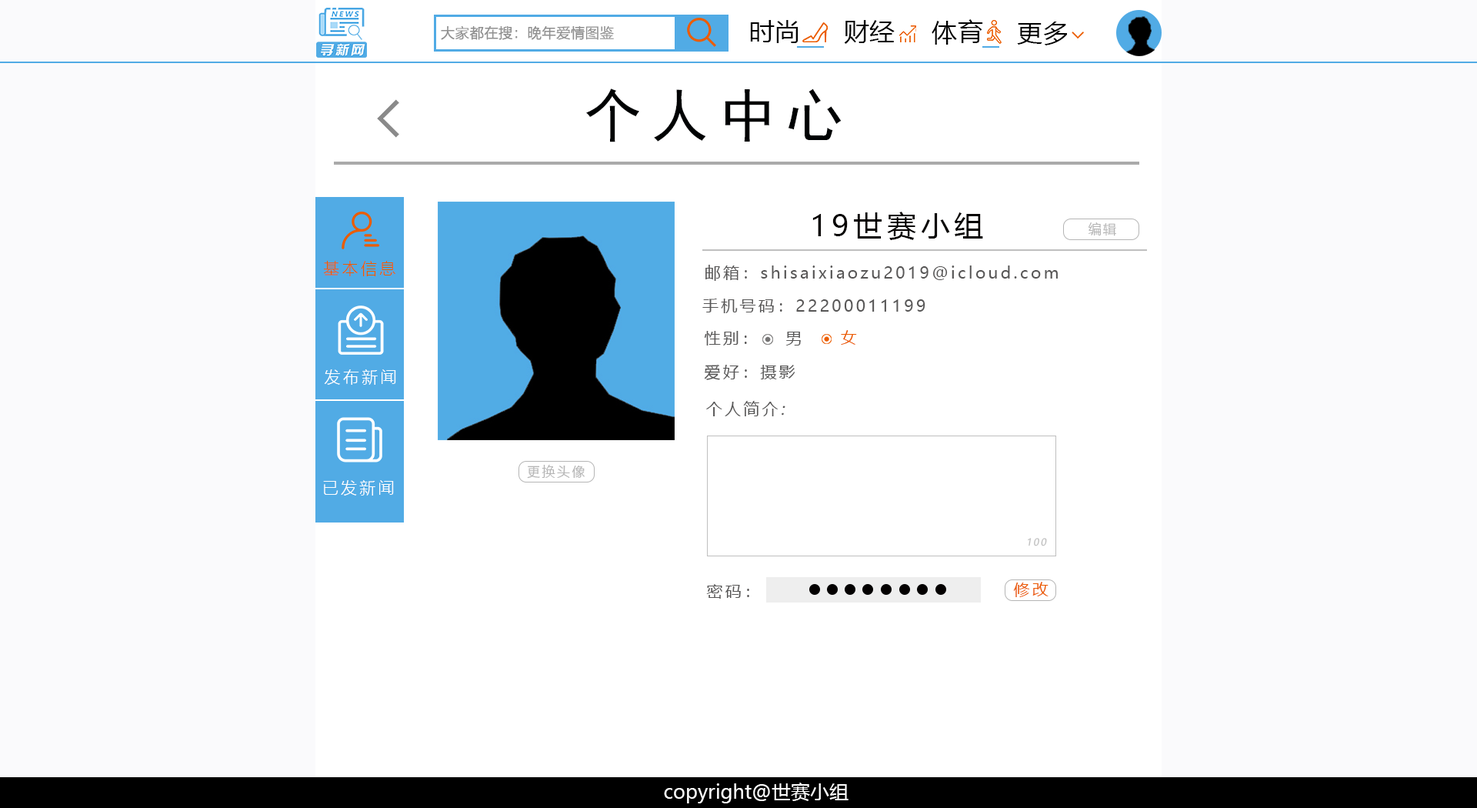
<style>
.page{position:relative;width:1477px;height:808px;background:#ffffff}
.page>*{position:absolute;margin:0}
.t1{font:14.1px "MicrosoftYaHeiLight";color:#8f8f8f;font-weight:bold}
.t2{font:25.6px "MicrosoftYaHei";color:#000000}
.t3{font:57.7px "SimHei";letter-spacing:0.165em;color:#000203}
.t4{font:28.8px "MicrosoftYaHei";letter-spacing:0.165em;color:#050201}
.t5{font:12.8px "MicrosoftYaHei";letter-spacing:0.165em;color:#b5b5b5}
.t6{font:16px "MicrosoftYaHeiLight";letter-spacing:0.165em;color:#eb5c00}
.t7{font:16px "MicrosoftYaHei";letter-spacing:0.165em;color:#575656}
.t8{font:16px "MicrosoftYaHei";letter-spacing:0.165em;color:#eb5c00}
.t9{font:16px "MicrosoftYaHeiLight";letter-spacing:0.165em;color:#ffffff}
.t10{font:16px "MicrosoftYaHei";letter-spacing:0.165em;color:#575656;font-style:italic}
.t11{font:16px "MicrosoftYaHeiLight";letter-spacing:0.165em;color:#fffefe}
.t12{font:9.6px "MicrosoftYaHei";letter-spacing:0.165em;color:#bfbfbf;font-style:italic}
.t13{font:19.2px "MicrosoftYaHei";color:#fefefe}
</style>
<div class="page">
<p class="t1" style="left:441px;top:26px;width:173px;height:14px">大家都在搜：晚年爱情图鉴</p>
<p class="t2" style="left:750px;top:20px;width:48px;height:23px">时尚</p>
<p class="t2" style="left:844px;top:20px;width:50px;height:24px">财经</p>
<p class="t2" style="left:931px;top:19px;width:52px;height:26px">体育</p>
<p class="t2" style="left:1017px;top:22px;width:50px;height:23px">更多</p>
<p class="t3" style="left:586px;top:88px;width:255px;height:54px">个人中心</p>
<p class="t4" style="left:812px;top:211px;width:171px;height:29px">19世赛小组</p>
<p class="t5" style="left:1088px;top:222px;width:28px;height:14px">编辑</p>
<p class="t6" style="left:323px;top:260px;width:72px;height:16px">基本信息</p>
<p class="t7" style="left:705px;top:265px;width:352px;height:16px">邮箱：shisaixiaozu2019@icloud.com</p>
<p class="t7" style="left:702px;top:298px;width:223px;height:15px">手机号码：22200011199</p>
<p class="t8" style="left:841px;top:330px;width:16px;height:15px">女</p>
<p class="t7" style="left:704px;top:331px;width:43px;height:14px">性别：</p>
<p class="t7" style="left:785px;top:331px;width:16px;height:14px">男</p>
<p class="t7" style="left:704px;top:365px;width:91px;height:15px">爱好：摄影</p>
<p class="t9" style="left:324px;top:369px;width:72px;height:16px">发布新闻</p>
<p class="t7" style="left:706px;top:401px;width:79px;height:15px">个人简介<span class="t10">:</span></p>
<p class="t5" style="left:527px;top:465px;width:58px;height:13px">更换头像</p>
<p class="t11" style="left:323px;top:480px;width:71px;height:15px">已发新闻</p>
<p class="t12" style="left:1027px;top:538px;width:20px;height:8px">100</p>
<p class="t8" style="left:1013px;top:581px;width:35px;height:16px">修改</p>
<p class="t7" style="left:706px;top:584px;width:43px;height:14px">密码：</p>
<p class="t13" style="left:664px;top:782px;width:184px;height:21px">copyright@世赛小组</p>
</div>
